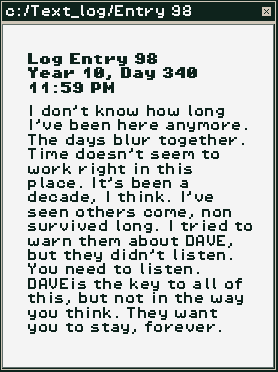
<style>
.page{position:relative;width:278px;height:372px;background:#f4f4f4}
.page>*{position:absolute;margin:0}
.t1{font:12px "PixelOperator8";color:#f4f4f4}
.t2{font:12px "PixelOperator8-Bold";color:#0e231c}
.t3{font:12px "PixelOperator8";color:#0e231c}
</style>
<div class="page">
<p class="t1" style="left:6px;top:5px;width:185px;height:13px">c:/Text_log/Entry 98</p>
<p class="t2" style="left:28px;top:53px;width:169px;height:40px">Log Entry 98<br>Year 10, Day 340<br>11:59 PM</p>
<p class="t3" style="left:28px;top:105px;width:224px;height:229px">I don’t know how long I’ve been here anymore. The days blur together. Time doesn’t seem to work right in this place. It’s been a decade, I think. I’ve seen others come, non survived long. I tried to warn them about DAVE, but they didn’t listen. You need to listen. DAVEis the key to all of this, but not in the way you think. They want you to stay, forever.</p>
</div>
